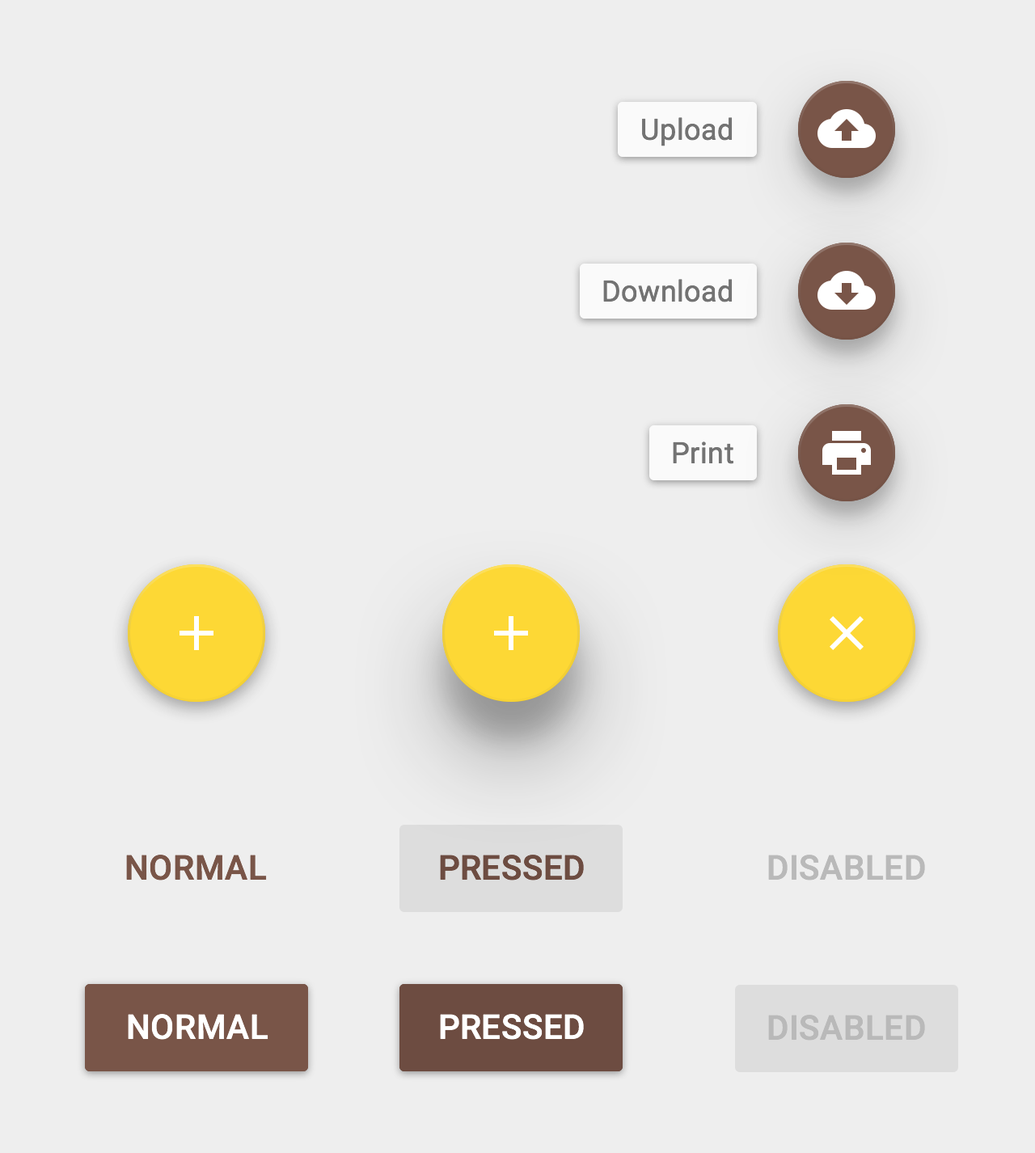
<style>
.page{position:relative;width:1035px;height:1153px;background:#eeeeee}
.page>*{position:absolute;margin:0}
.t1{font:29.1px "Roboto-Regular";letter-spacing:0.02em;color:#737373}
.t2{font:33.9px "Roboto-Medium";letter-spacing:0.01em;color:#795548;text-transform:uppercase}
.t3{font:33.9px "Roboto-Medium";letter-spacing:0.01em;color:#6d4c41;text-transform:uppercase}
.t4{font:33.9px "Roboto-Medium";letter-spacing:0.01em;color:#b9b9b9;text-transform:uppercase}
.t5{font:33.9px "Roboto-Medium";letter-spacing:0.01em;color:#ffffff;text-transform:uppercase}
</style>
<div class="page">
<p class="t1" style="left:642px;top:117px;width:90px;height:29px">Upload</p>
<p class="t1" style="left:603px;top:279px;width:129px;height:23px">Download</p>
<p class="t1" style="left:672px;top:441px;width:61px;height:23px">Print</p>
<p class="t2" style="left:126px;top:854px;width:141px;height:26px">Normal</p>
<p class="t3" style="left:440px;top:854px;width:144px;height:26px">Pressed</p>
<p class="t4" style="left:768px;top:854px;width:157px;height:26px">Disabled</p>
<p class="t5" style="left:128px;top:1014px;width:140px;height:25px">Normal</p>
<p class="t5" style="left:440px;top:1014px;width:144px;height:25px">Pressed</p>
<p class="t4" style="left:768px;top:1014px;width:157px;height:26px">Disabled</p>
</div>
